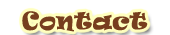
<style>
.page{position:relative;width:170px;height:35px;background:#ffffff}
.page>*{position:absolute;margin:0}
.t1{font:22.9px "Ravie";letter-spacing:0.025em;color:#773e1e}
</style>
<div class="page">
<p class="t1" style="left:22px;top:11px;width:126px;height:21px">Contact</p>
</div>
